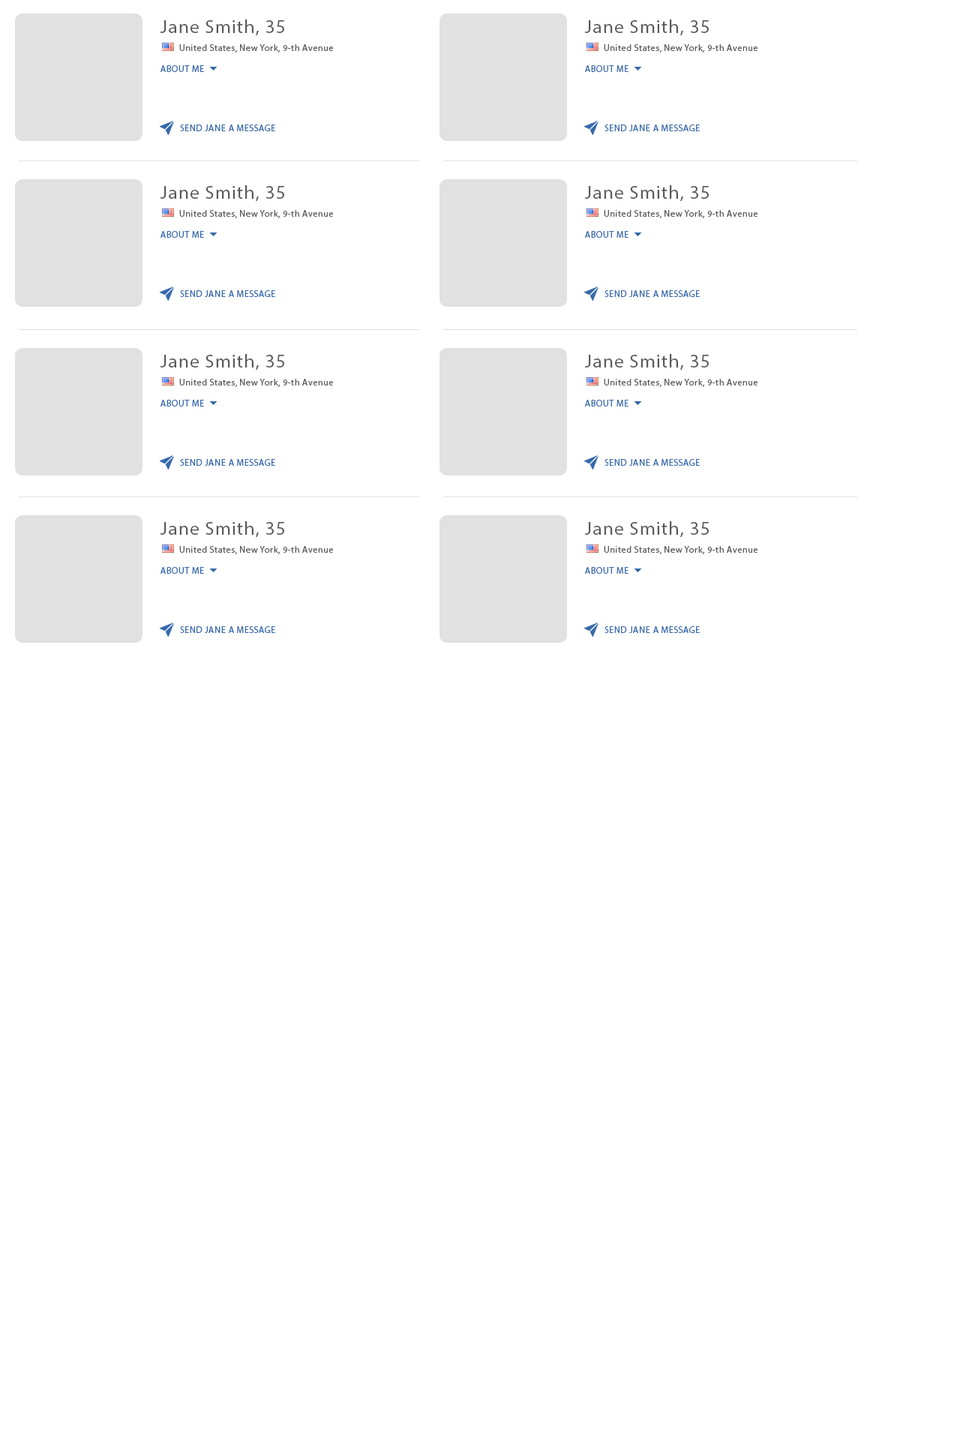
<style>
.page{position:relative;width:960px;height:1440px;background:#ffffff}
.page>*{position:absolute;margin:0}
.t1{font:18.8px "MyriadPro-Regular";letter-spacing:0.05em;color:#5a5a5a}
.t2{font:9px "MyriadPro-Regular";letter-spacing:0.05em;color:#5a5a5a}
.t3{font:9px "MyriadPro-Regular";letter-spacing:0.05em;color:#366aab;text-transform:uppercase}
</style>
<div class="page">
<p class="t1" style="left:160px;top:20px;width:124px;height:16px">Jane Smith, 35</p>
<p class="t1" style="left:584px;top:20px;width:125px;height:16px">Jane Smith, 35</p>
<p class="t2" style="left:179px;top:44px;width:154px;height:8px">United States, New York, 9-th Avenue</p>
<p class="t2" style="left:604px;top:44px;width:154px;height:8px">United States, New York, 9-th Avenue</p>
<p class="t3" style="left:160px;top:65px;width:44px;height:7px">About me</p>
<p class="t3" style="left:585px;top:65px;width:43px;height:7px">About me</p>
<p class="t3" style="left:180px;top:124px;width:95px;height:7px">Send Jane a message</p>
<p class="t3" style="left:604px;top:124px;width:96px;height:7px">Send Jane a message</p>
<p class="t1" style="left:160px;top:185px;width:124px;height:17px">Jane Smith, 35</p>
<p class="t1" style="left:584px;top:185px;width:125px;height:17px">Jane Smith, 35</p>
<p class="t2" style="left:179px;top:210px;width:154px;height:8px">United States, New York, 9-th Avenue</p>
<p class="t2" style="left:604px;top:210px;width:154px;height:8px">United States, New York, 9-th Avenue</p>
<p class="t3" style="left:160px;top:231px;width:44px;height:7px">About me</p>
<p class="t3" style="left:585px;top:231px;width:43px;height:7px">About me</p>
<p class="t3" style="left:180px;top:290px;width:95px;height:7px">Send Jane a message</p>
<p class="t3" style="left:604px;top:290px;width:96px;height:7px">Send Jane a message</p>
<p class="t1" style="left:160px;top:354px;width:124px;height:16px">Jane Smith, 35</p>
<p class="t1" style="left:584px;top:354px;width:125px;height:16px">Jane Smith, 35</p>
<p class="t2" style="left:179px;top:379px;width:154px;height:8px">United States, New York, 9-th Avenue</p>
<p class="t2" style="left:604px;top:379px;width:154px;height:8px">United States, New York, 9-th Avenue</p>
<p class="t3" style="left:160px;top:400px;width:44px;height:6px">About me</p>
<p class="t3" style="left:585px;top:400px;width:43px;height:6px">About me</p>
<p class="t3" style="left:180px;top:459px;width:95px;height:7px">Send Jane a message</p>
<p class="t3" style="left:604px;top:459px;width:96px;height:7px">Send Jane a message</p>
<p class="t1" style="left:160px;top:521px;width:124px;height:17px">Jane Smith, 35</p>
<p class="t1" style="left:584px;top:521px;width:125px;height:17px">Jane Smith, 35</p>
<p class="t2" style="left:179px;top:546px;width:154px;height:8px">United States, New York, 9-th Avenue</p>
<p class="t2" style="left:604px;top:546px;width:154px;height:8px">United States, New York, 9-th Avenue</p>
<p class="t3" style="left:160px;top:567px;width:44px;height:7px">About me</p>
<p class="t3" style="left:585px;top:567px;width:43px;height:7px">About me</p>
<p class="t3" style="left:180px;top:626px;width:95px;height:7px">Send Jane a message</p>
<p class="t3" style="left:604px;top:626px;width:96px;height:7px">Send Jane a message</p>
</div>
